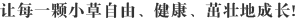
<style>
.page{position:relative;width:300px;height:20px;background:#ffffff}
.page>*{position:absolute;margin:0}
.t1{font:16.5px "FZDBSJW--GB1-0";letter-spacing:0.04em;color:#333333}
</style>
<div class="page">
<p class="t1" style="left:0px;top:2px;width:295px;height:16px">让每一颗小草自由、健康、茁壮地成长!</p>
</div>
